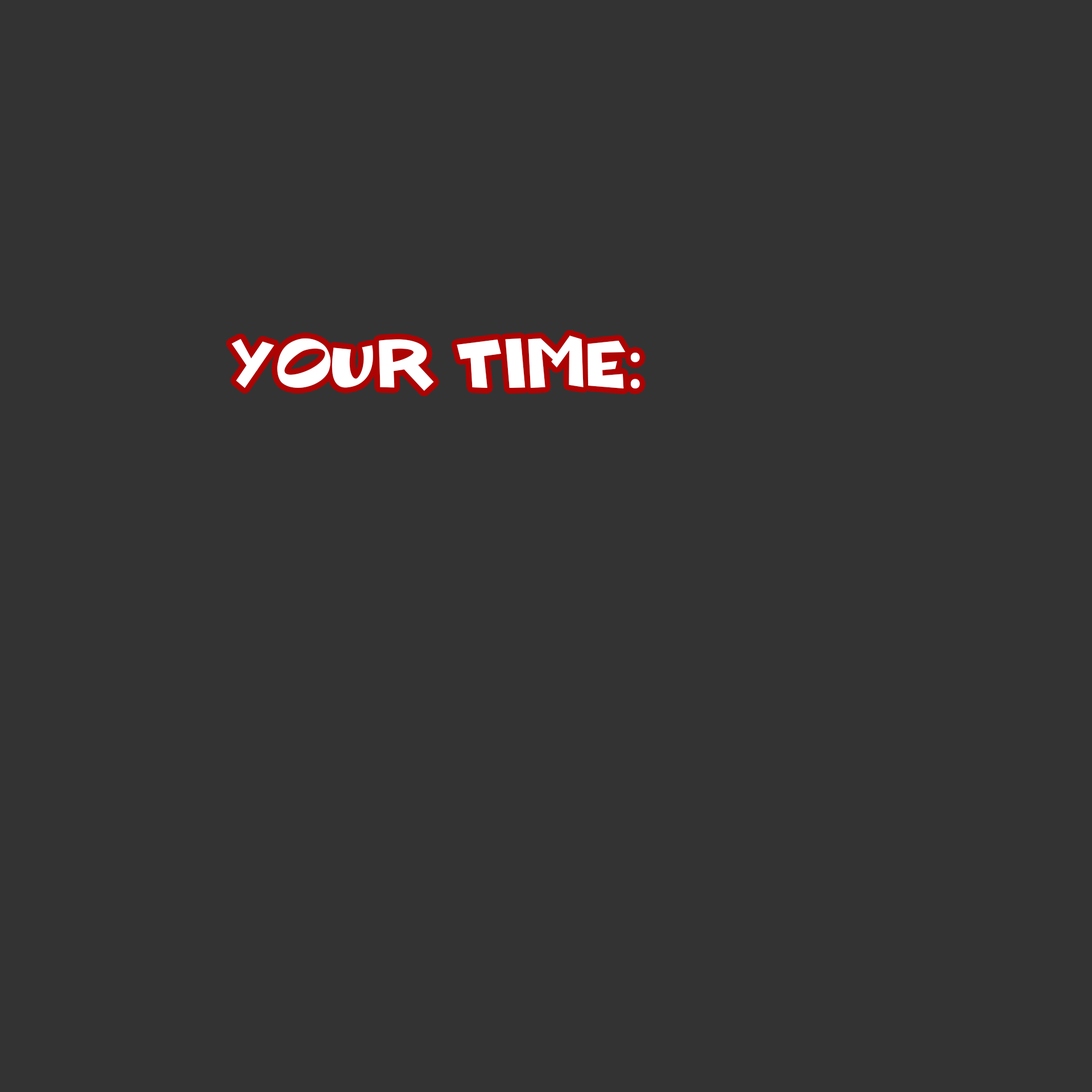
<style>
.page{position:relative;width:1092px;height:1092px;background:#333333}
.page>*{position:absolute;margin:0}
.t1{font:75.8px "BLOCKHEADDUDEPersonalUse";color:#ffffff}
.t2{font:75.8px "MyriadPro-Regular";color:#ffffff}
</style>
<div class="page">
<p class="t1" style="left:231px;top:336px;width:409px;height:55px">your Time<span class="t2">:</span></p>
</div>
